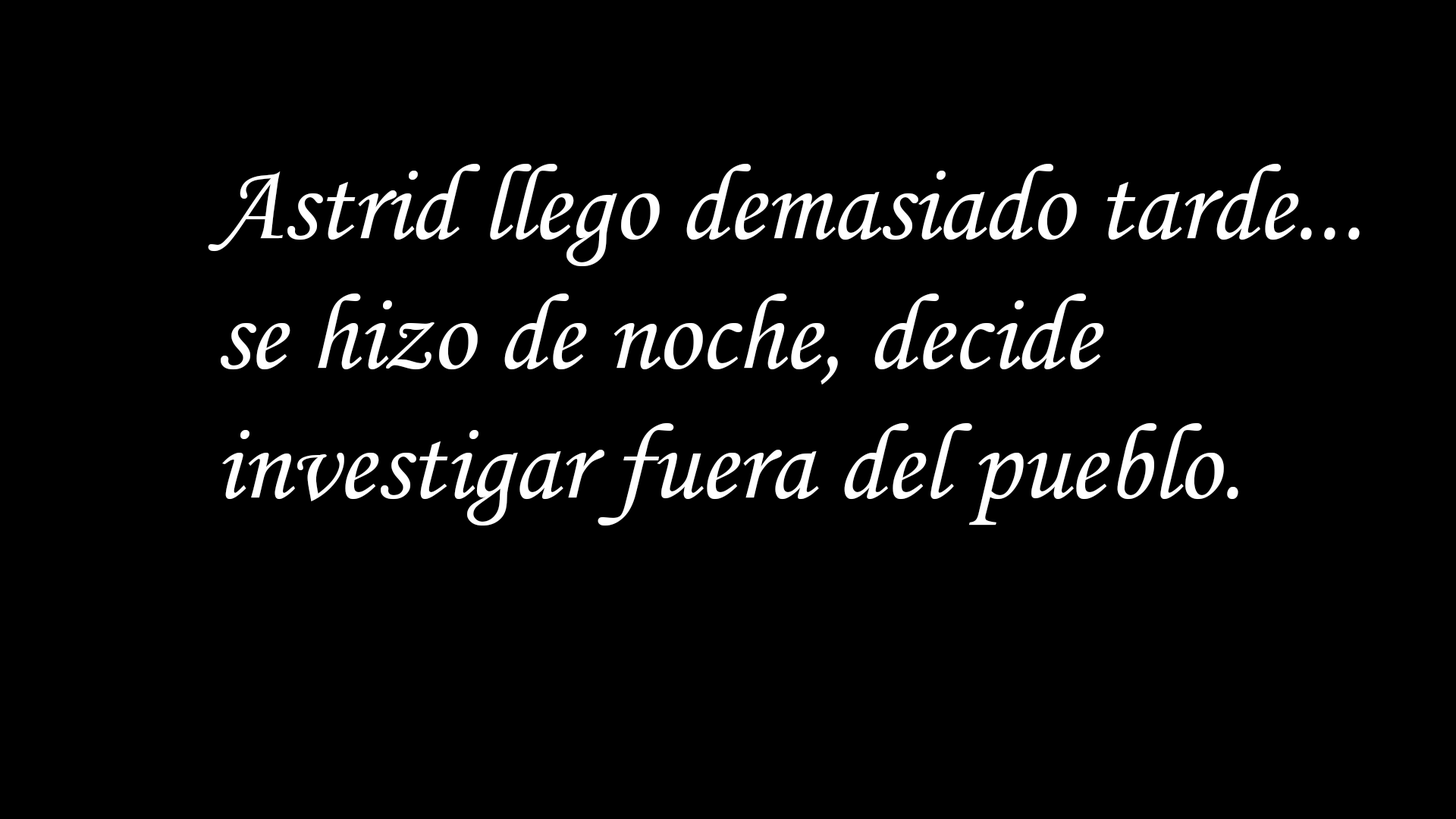
<style>
.page{position:relative;width:1456px;height:819px;background:#000000}
.page>*{position:absolute;margin:0}
.t1{font:108.2px "MonotypeCorsiva";color:#ffffff}
</style>
<div class="page">
<p class="t1" style="left:208px;top:164px;width:1152px;height:362px">Astrid llego demasiado tarde...<br>se hizo de noche, decide<br>investigar fuera del pueblo.</p>
</div>
